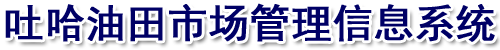
<style>
.page{position:relative;width:500px;height:50px;background:#ffffff}
.page>*{position:absolute;margin:0}
.t1{font:40px "SimHei";color:#000066;font-weight:bold}
</style>
<div class="page">
<p class="t1" style="left:5px;top:3px;width:490px;height:39px">吐哈油田市场管理信息系统</p>
</div>
